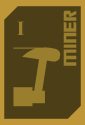
<style>
.page{position:relative;width:85px;height:125px;background:#4c3f17}
.page>*{position:absolute;margin:0}
.t1{font:20px "TransformersMovie";letter-spacing:0.04em;color:#997e2e}
.t2{font:20px "TimesNewRomanPS-BoldMT";letter-spacing:-0.04em;color:#997e2e}
</style>
<div class="page">
<p class="t1" style="left:63px;top:10px;width:14px;height:56px;rotate:-90deg">miner</p>
<p class="t2" style="left:17px;top:21px;width:7px;height:14px">I</p>
</div>
